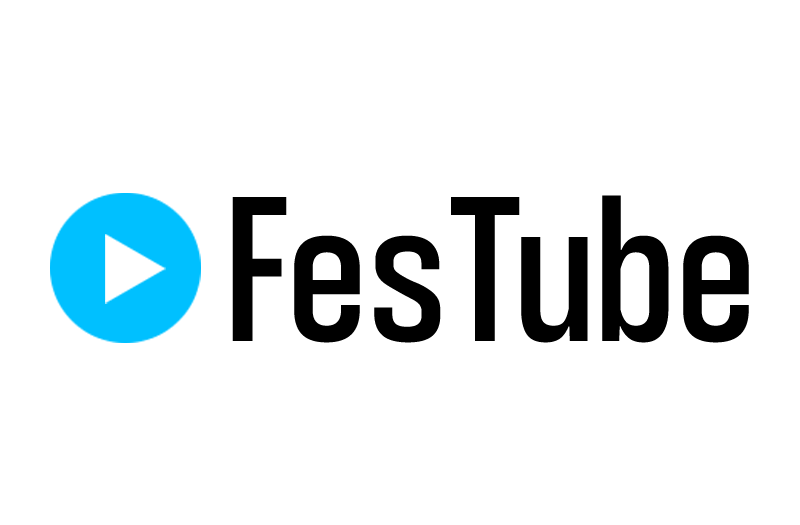
<style>
.page{position:relative;width:800px;height:525px;background:#ffffff}
.page>*{position:absolute;margin:0}
.t1{font:216.4px "CoolveticaCondensedRg-Regular";letter-spacing:0.01em;color:#000000}
</style>
<div class="page">
<p class="t1" style="left:232px;top:195px;width:517px;height:148px">FesTube</p>
</div>
